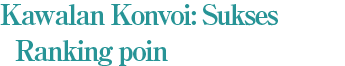
<style>
.page{position:relative;width:345px;height:66px;background:#ffffff}
.page>*{position:absolute;margin:0}
.t1{font:28px/36px "RyuminPro-ExBold";letter-spacing:-0.08em;color:#279496}
</style>
<div class="page">
<p class="t1" style="left:0px;top:4px;width:278px;height:62px">Kawalan Konvoi: Sukses<br>  Ranking poin</p>
</div>
